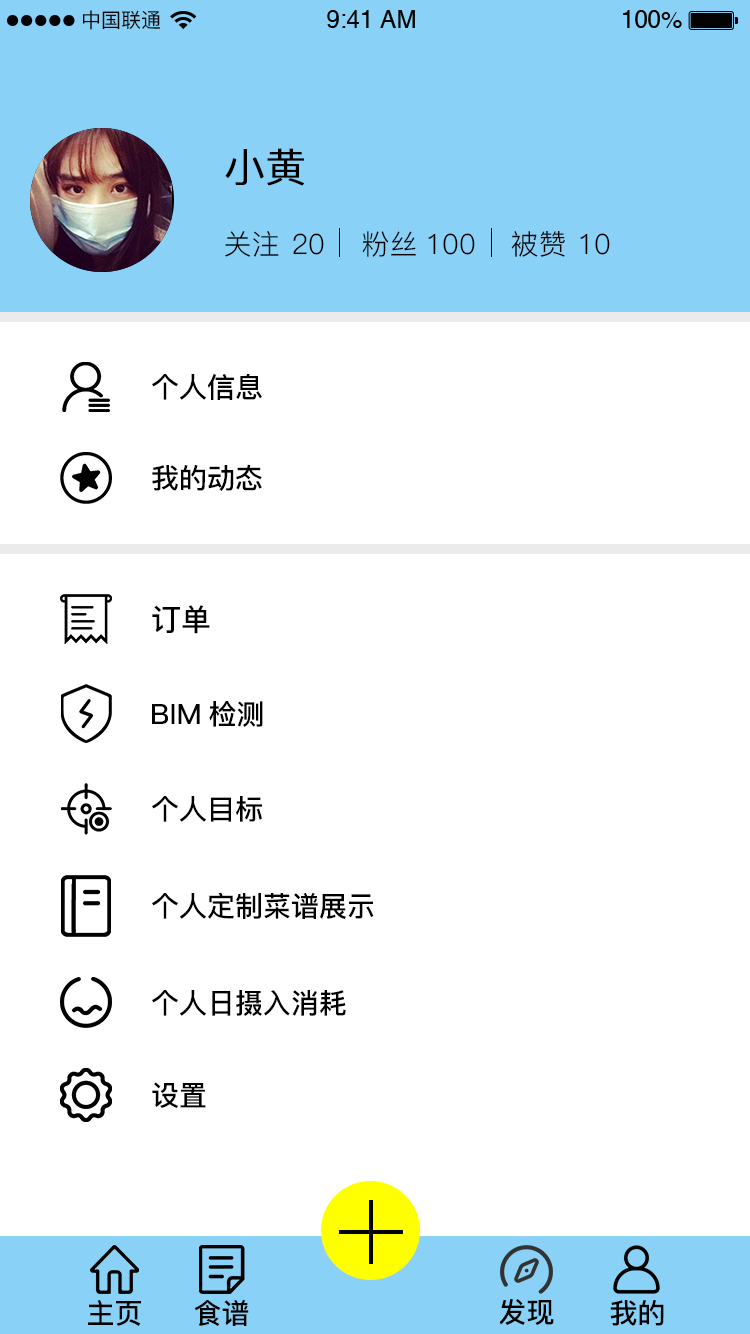
<style>
.page{position:relative;width:750px;height:1334px;background:#ffffff}
.page>*{position:absolute;margin:0}
.t1{font:20px "PingFang-SC-Medium";color:#030303}
.t2{font:40px "PingFang-SC-Regular";color:#000000;font-weight:bold}
.t3{font:28px "PingFang-SC-Regular";color:#000000}
.t4{font:28px "PingFang-SC-Bold";color:#000000}
.t5{font:30px "PingFang-SC-Bold";color:#000000}
</style>
<div class="page">
<p class="t1" style="left:82px;top:10px;width:78px;height:20px">中国联通</p>
<p class="t2" style="left:225px;top:148px;width:79px;height:38px">小黄</p>
<p class="t3" style="left:225px;top:231px;width:54px;height:26px">关注</p>
<p class="t3" style="left:293px;top:233px;width:31px;height:22px">20</p>
<p class="t3" style="left:362px;top:231px;width:54px;height:26px">粉丝</p>
<p class="t3" style="left:428px;top:233px;width:47px;height:22px">100</p>
<p class="t3" style="left:511px;top:230px;width:54px;height:27px">被赞</p>
<p class="t3" style="left:580px;top:233px;width:30px;height:22px">10</p>
<p class="t4" style="left:152px;top:373px;width:110px;height:27px">个人信息</p>
<p class="t4" style="left:152px;top:464px;width:110px;height:27px">我的动态</p>
<p class="t5" style="left:152px;top:605px;width:58px;height:29px">订单</p>
<p class="t4" style="left:152px;top:701px;width:111px;height:26px">BIM检测</p>
<p class="t4" style="left:152px;top:796px;width:110px;height:26px">个人目标</p>
<p class="t4" style="left:152px;top:892px;width:222px;height:27px">个人定制菜谱展示</p>
<p class="t4" style="left:152px;top:990px;width:194px;height:26px">个人日摄入消耗</p>
<p class="t4" style="left:152px;top:1082px;width:54px;height:26px">设置</p>
<p class="t4" style="left:88px;top:1300px;width:53px;height:26px">主页</p>
<p class="t4" style="left:194px;top:1299px;width:55px;height:27px">食谱</p>
<p class="t4" style="left:499px;top:1299px;width:55px;height:26px">发现</p>
<p class="t4" style="left:610px;top:1300px;width:54px;height:26px">我的</p>
</div>
